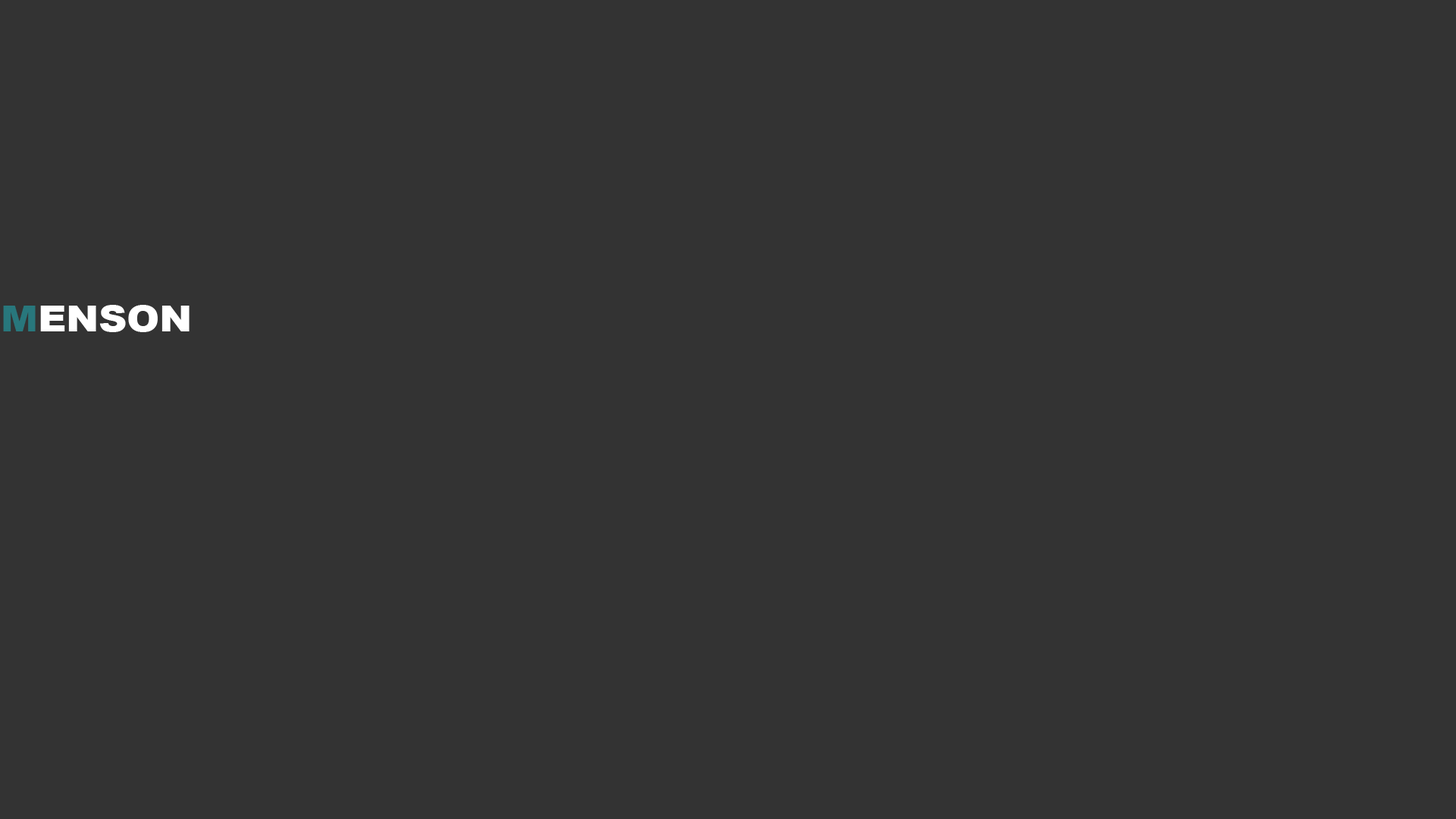
<style>
.page{position:relative;width:1456px;height:819px;background:#333333}
.page>*{position:absolute;margin:0}
.t1{font:35.8px "Arial-Black";color:#ffffff;scale:1.09 1}
.t2{font:35.8px "Arial-Black";color:#28777c;scale:1.09 1}
</style>
<div class="page">
<p class="t1" style="left:3px;top:305px;width:187px;height:27px"><span class="t2">M</span>ENSON</p>
</div>
